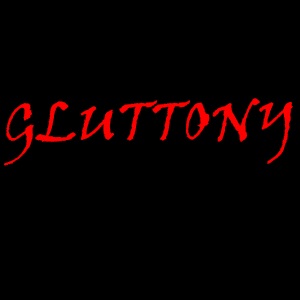
<style>
.page{position:relative;width:300px;height:300px;background:#000000}
.page>*{position:absolute;margin:0}
.t1{font:55px "VinerHandITC";color:#ff0000}
</style>
<div class="page">
<p class="t1" style="left:4px;top:98px;width:289px;height:68px">GLUTTONY</p>
</div>
